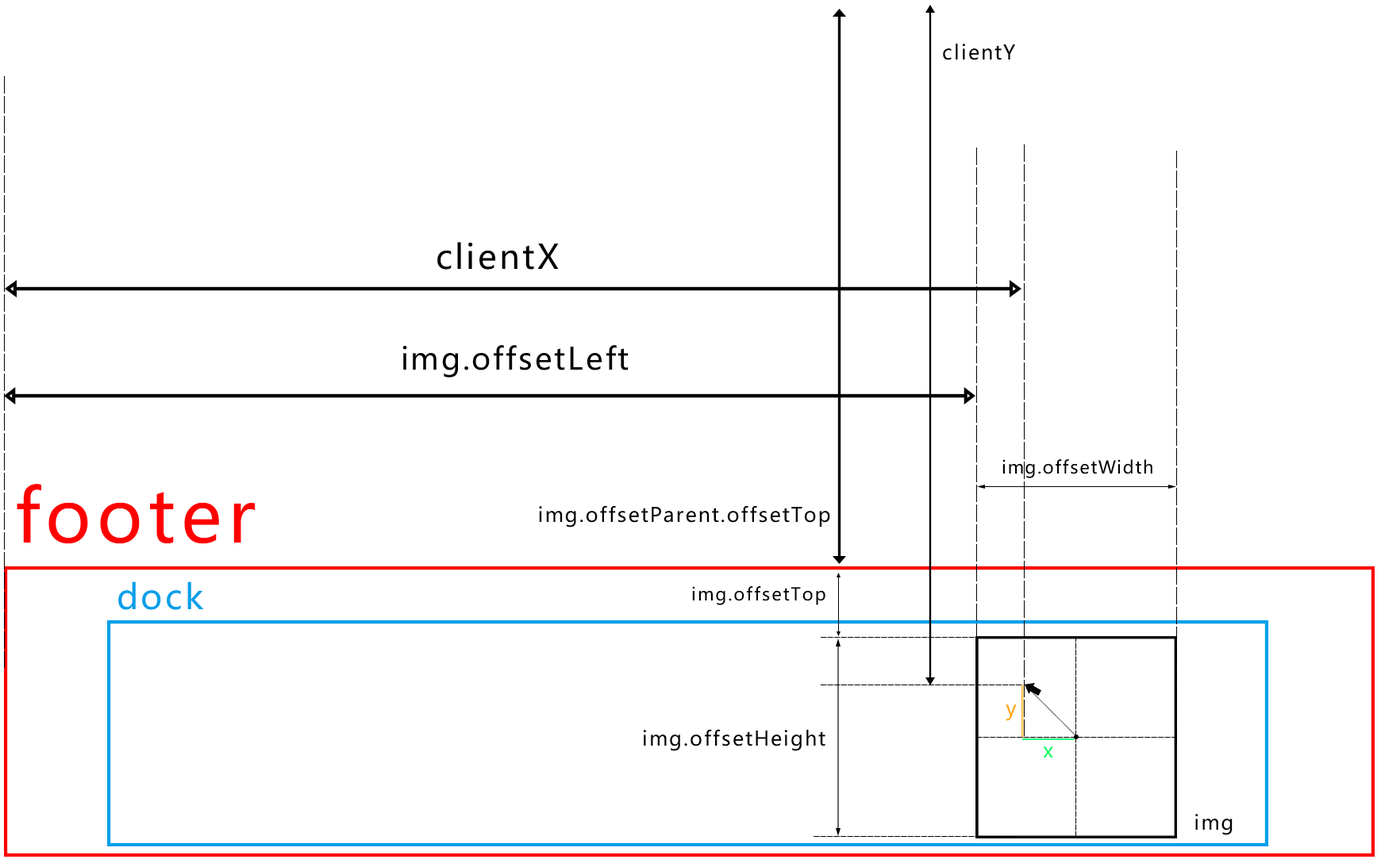
<style>
.page{position:relative;width:1381px;height:863px;background:#ffffff}
.page>*{position:absolute;margin:0}
.t1{font:19.8px "MicrosoftYaHeiUI";letter-spacing:0.08em;color:#000000}
.t2{font:33.1px "MicrosoftYaHeiUI";letter-spacing:0.08em;color:#000000}
.t3{font:29.8px "MicrosoftYaHeiUI";letter-spacing:0.08em;color:#000000}
.t4{font:17.1px "MicrosoftYaHeiUI";letter-spacing:0.08em;color:#000000}
.t5{font:72px "MicrosoftYaHeiUI";letter-spacing:0.08em;color:#ff0000}
.t6{font:34.2px "MicrosoftYaHeiUI";letter-spacing:0.08em;color:#00a0e9}
.t7{font:17.7px "MicrosoftYaHeiUI";letter-spacing:0.08em;color:#000000}
.t8{font:19.8px "MicrosoftYaHeiUI";letter-spacing:0.08em;color:#ffa800}
.t9{font:19.8px "MicrosoftYaHeiUI";letter-spacing:0.08em;color:#00ff66}
</style>
<div class="page">
<p class="t1" style="left:943px;top:44px;width:72px;height:16px">clientY</p>
<p class="t2" style="left:437px;top:242px;width:122px;height:28px">clientX</p>
<p class="t3" style="left:402px;top:345px;width:227px;height:33px">img.offsetLeft</p>
<p class="t4" style="left:1002px;top:460px;width:150px;height:19px">img.offsetWidth</p>
<p class="t5" style="left:17px;top:484px;width:239px;height:60px">footer</p>
<p class="t1" style="left:539px;top:506px;width:291px;height:22px">img.offsetParent.offsetTop</p>
<p class="t6" style="left:118px;top:582px;width:86px;height:28px">dock</p>
<p class="t7" style="left:692px;top:587px;width:133px;height:19px">img.offsetTop</p>
<p class="t8" style="left:1006px;top:705px;width:11px;height:16px">y</p>
<p class="t1" style="left:643px;top:729px;width:182px;height:23px">img.offsetHeight</p>
<p class="t9" style="left:1043px;top:747px;width:10px;height:11px">x</p>
<p class="t1" style="left:1195px;top:814px;width:38px;height:22px">img</p>
</div>
